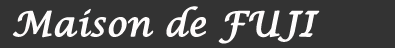
<style>
.page{position:relative;width:395px;height:48px;background:#333333}
.page>*{position:absolute;margin:0}
.t1{font:34px "LucidaCalligraphy-Italic";color:#fefcfc;font-weight:bold}
</style>
<div class="page">
<p class="t1" style="left:12px;top:6px;width:308px;height:38px">Maison de FUJI</p>
</div>
